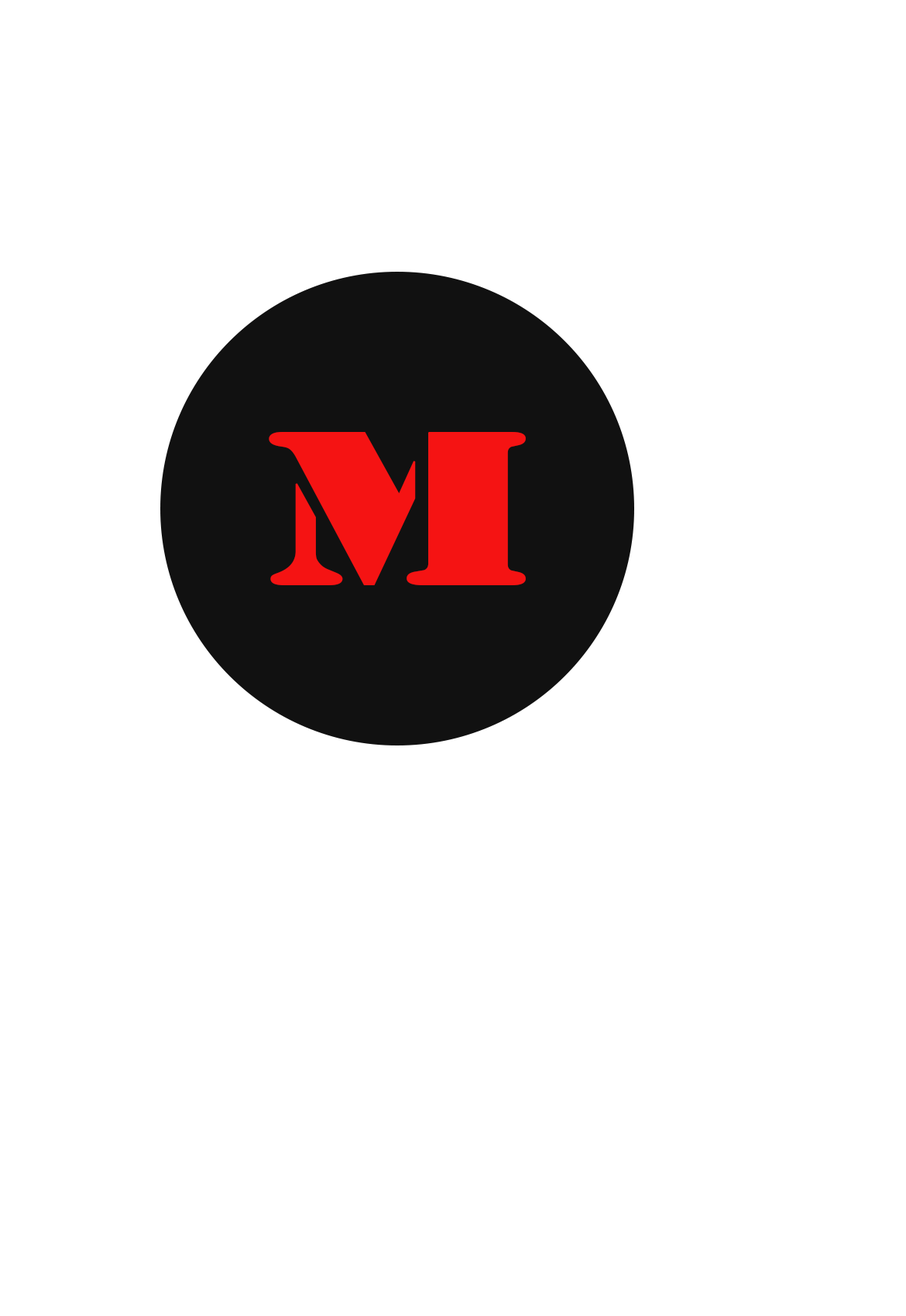
<style>
.page{position:relative;width:906px;height:1316px;background:#ffffff}
.page>*{position:absolute;margin:0}
.t1{font:227.3px "Stencil";color:#f51313;font-weight:bold;scale:1.58 1}
</style>
<div class="page">
<p class="t1" style="left:269px;top:432px;width:257px;height:153px">M</p>
</div>
